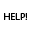
<style>
.page{position:relative;width:35px;height:35px;background:#ffffff}
.page>*{position:absolute;margin:0}
.t1{font:10px "MyriadPro-Regular";color:#000000}
</style>
<div class="page">
<p class="t1" style="left:4px;top:13px;width:23px;height:7px">HELP!</p>
</div>
